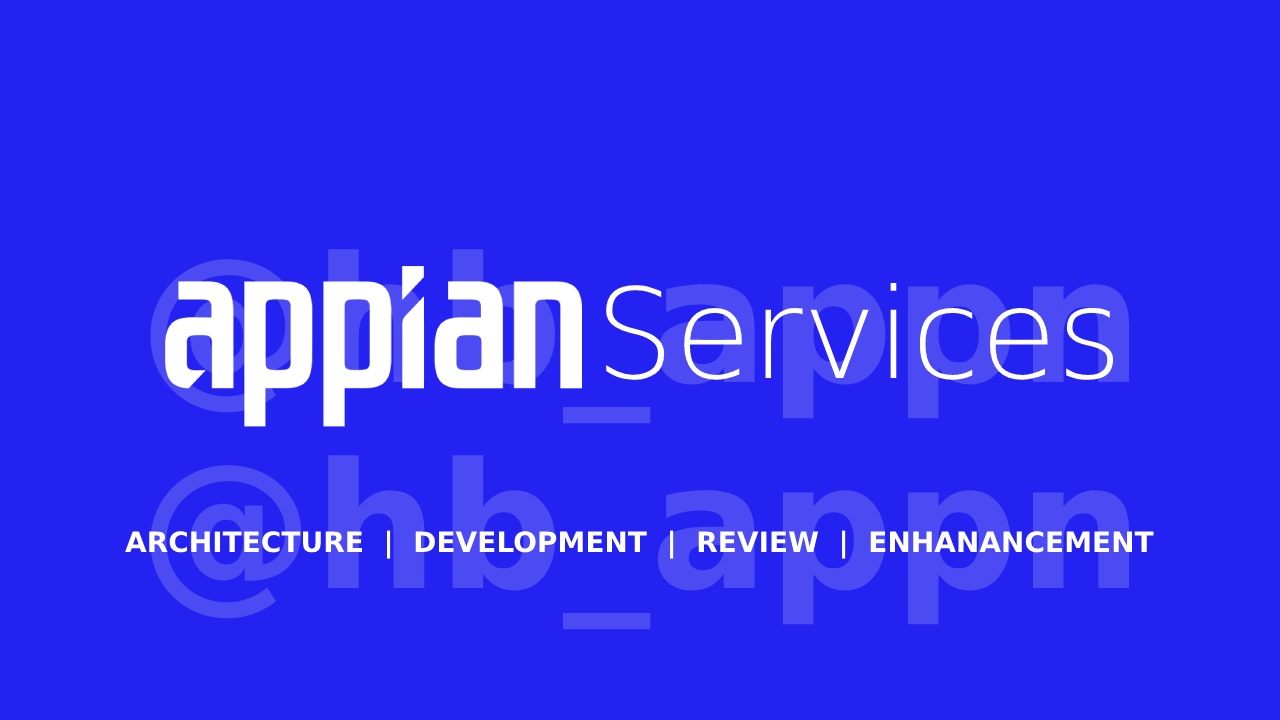
<style>
.page{position:relative;width:1280px;height:720px;background:#2322f0}
.page>*{position:absolute;margin:0}
.t1{font:125px "DejaVuSans-ExtraLight";color:#ffffff}
.t2{font:174.7px "DejaVuSans-Bold";color:#4b4af3}
.t3{font:28px "DejaVuSans-Bold";color:#ffffff}
</style>
<div class="page">
<p class="t1" style="left:606px;top:283px;width:508px;height:97px">Services</p>
<p class="t2" style="left:150px;top:455px;width:980px;height:175px">@hb_appn</p>
<p class="t3" style="left:125px;top:530px;width:1029px;height:29px">ARCHITECTURE  |  DEVELOPMENT  |  REVIEW  |  ENHANANCEMENT</p>
</div>
